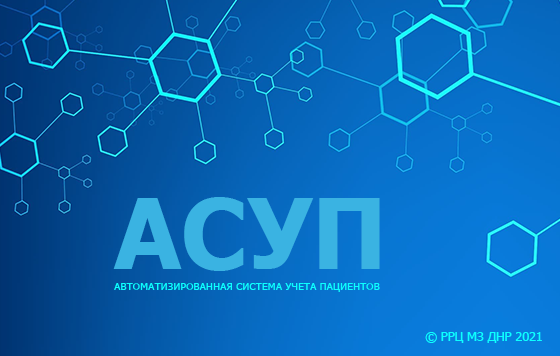
<style>
.page{position:relative;width:560px;height:356px}
.page>*{position:absolute;margin:0}
.t1{font:98.3px "Tahoma-Bold";color:#3ab3e2}
.t2{font:10.5px "Tahoma";color:#0dffff}
.t3{font:12.6px "Tahoma";color:#0dffff}
</style>
<div class="page">
<p class="t1" style="left:113px;top:197px;width:267px;height:74px">АСУП</p>
<p class="t2" style="left:114px;top:283px;width:266px;height:9px">АВТОМАТИЗИРОВАННАЯ СИСТЕМА УЧЕТА ПАЦИЕНТОВ</p>
<p class="t3" style="left:425px;top:332px;width:117px;height:11px">© РРЦ МЗ ДНР 2021</p>
</div>
